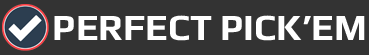
<style>
.page{position:relative;width:369px;height:55px;background:#333333}
.page>*{position:absolute;margin:0}
.t1{font:37px "Play-Bold";color:#ffffff}
</style>
<div class="page">
<p class="t1" style="left:54px;top:15px;width:311px;height:26px">PERFECT PICK’EM</p>
</div>
